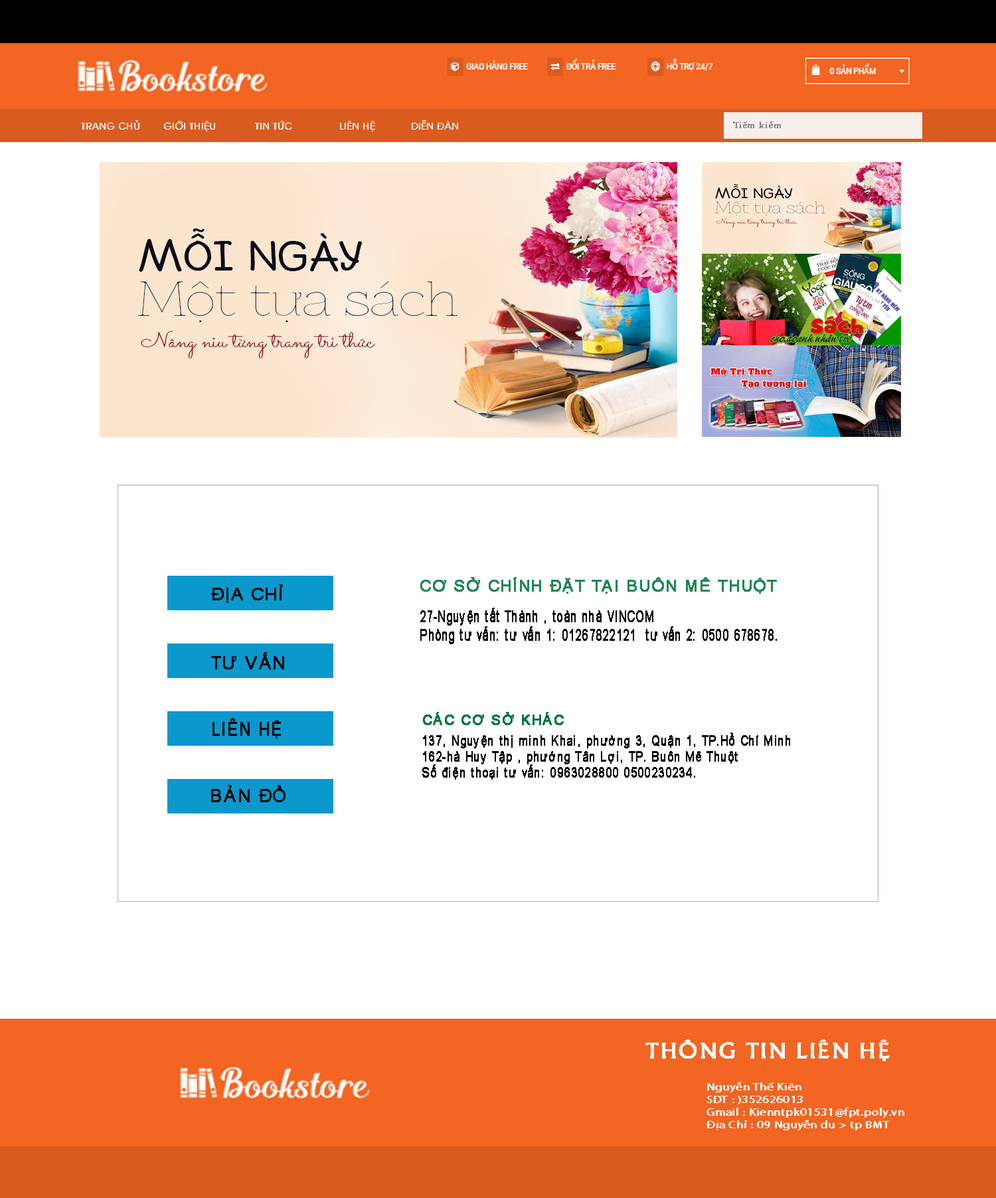
<style>
.page{position:relative;width:996px;height:1198px;background:#ffffff}
.page>*{position:absolute;margin:0}
.t1{font:9.3px "UTM-Avo";color:#f7eeea;font-weight:bold}
.t2{font:9.3px "VNI-Garam";color:#888584;font-weight:bold}
.t3{font:9.3px "MinionPro-Regular";color:#888584;font-weight:bold}
.t4{font:16px "ArialMT";letter-spacing:0.06em;color:#1c8753;font-weight:bold}
.t5{font:16.7px "ArialMT";letter-spacing:0.06em;color:#070707;font-weight:bold}
.t6{font:15px "ArialMT";letter-spacing:0.06em;color:#080808;font-weight:bold;scale:0.69 1}
.t7{font:17.2px "ArialMT";letter-spacing:0.06em;color:#030303;font-weight:bold}
.t8{font:13.8px "ArialMT";letter-spacing:0.06em;color:#03773e;font-weight:bold}
.t9{font:18.8px "ArialMT";letter-spacing:0.06em;color:#030303;font-weight:bold;scale:0.83 1}
.t10{font:13.3px "ArialMT";letter-spacing:0.06em;color:#030303;font-weight:bold;scale:0.79 1}
.t11{font:17.2px "ArialMT";letter-spacing:0.06em;color:#070707;font-weight:bold}
.t12{font:22.6px "UTM-Khuccamta";letter-spacing:0.025em;color:#faf7f6;font-weight:bold;scale:1.08 1}
.t13{font:10.5px "MyriadPro-Regular";letter-spacing:0.025em;color:#faf7f6;font-weight:bold;scale:1.14 1}
</style>
<div class="page">
<p class="t1" style="left:81px;top:120px;width:58px;height:9px">TRANG CHỦ</p>
<p class="t1" style="left:164px;top:121px;width:51px;height:10px">GIỚI THIỆU</p>
<p class="t1" style="left:255px;top:121px;width:37px;height:8px">TIN TỨC</p>
<p class="t1" style="left:340px;top:121px;width:35px;height:10px">LIÊN HỆ</p>
<p class="t1" style="left:412px;top:120px;width:46px;height:9px">DIỄN ĐÀN</p>
<p class="t2" style="left:733px;top:121px;width:48px;height:7px">Ti<span class="t3">ề</span>m ki<span class="t3">ế</span>m</p>
<p class="t4" style="left:420px;top:577px;width:357px;height:16px">CƠ SỞ CHÍNH ĐẶT TẠI BUÔN MÊ THUỘT</p>
<p class="t5" style="left:211px;top:584px;width:72px;height:19px">ĐỊA CHỈ</p>
<p class="t6" style="left:420px;top:607px;width:357px;height:37px">27-Nguyện tất Thành , toàn nhà VINCOM<br>Phòng tư vấn: tư vấn 1: 01267822121  tư vấn 2: 0500 678678.</p>
<p class="t7" style="left:211px;top:652px;width:73px;height:17px">TƯ VẤN</p>
<p class="t8" style="left:423px;top:712px;width:141px;height:13px">CÁC CƠ SỞ KHÁC</p>
<p class="t9" style="left:212px;top:718px;width:69px;height:20px">LIÊN HỆ</p>
<p class="t10" style="left:422px;top:732px;width:368px;height:47px">137, Nguyện thị minh Khai, phường 3, Quận 1, TP.Hồ Chí Minh<br>162-hà Huy Tập , phướng Tân Lợi, TP. Buôn Mê Thuột<br>Số điện thoại tư vấn: 0963028800 0500230234.</p>
<p class="t11" style="left:211px;top:785px;width:74px;height:17px">BẢN ĐỒ</p>
<p class="t12" style="left:645px;top:1039px;width:245px;height:22px">THÔNG TIN LIÊN HỆ</p>
<p class="t13" style="left:706px;top:1081px;width:198px;height:49px">Nguyễn Thế Kiên <br>SDT : )352626013<br>Gmail : Kienntpk01531@fpt.poly.vn<br>Địa Chỉ : 09 Nguyễn du &gt; tp BMT</p>
</div>
